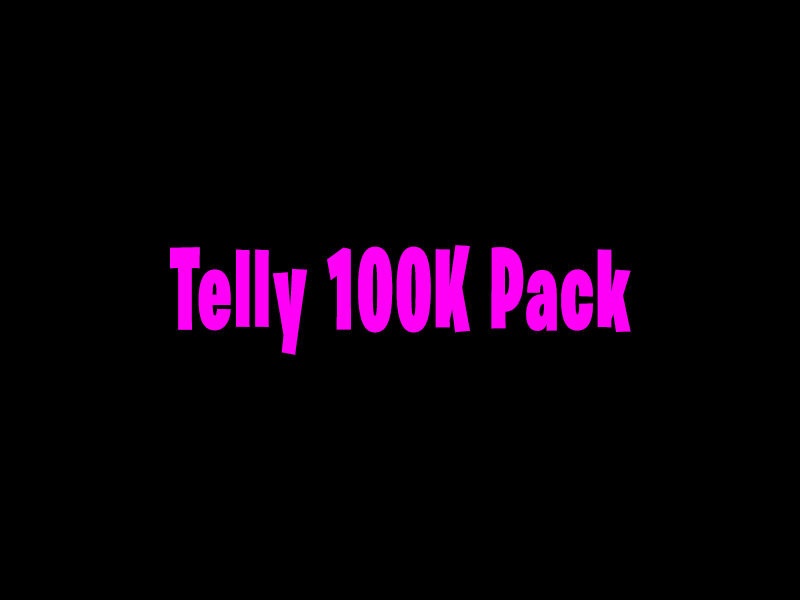
<style>
.page{position:relative;width:800px;height:600px;background:#000000}
.page>*{position:absolute;margin:0}
.t1{font:117px "BurbankBigCondensed-Black";letter-spacing:0.04em;color:#ff00f6;scale:0.64 1}
</style>
<div class="page">
<p class="t1" style="left:170px;top:245px;width:461px;height:110px">Telly 100K Pack</p>
</div>
